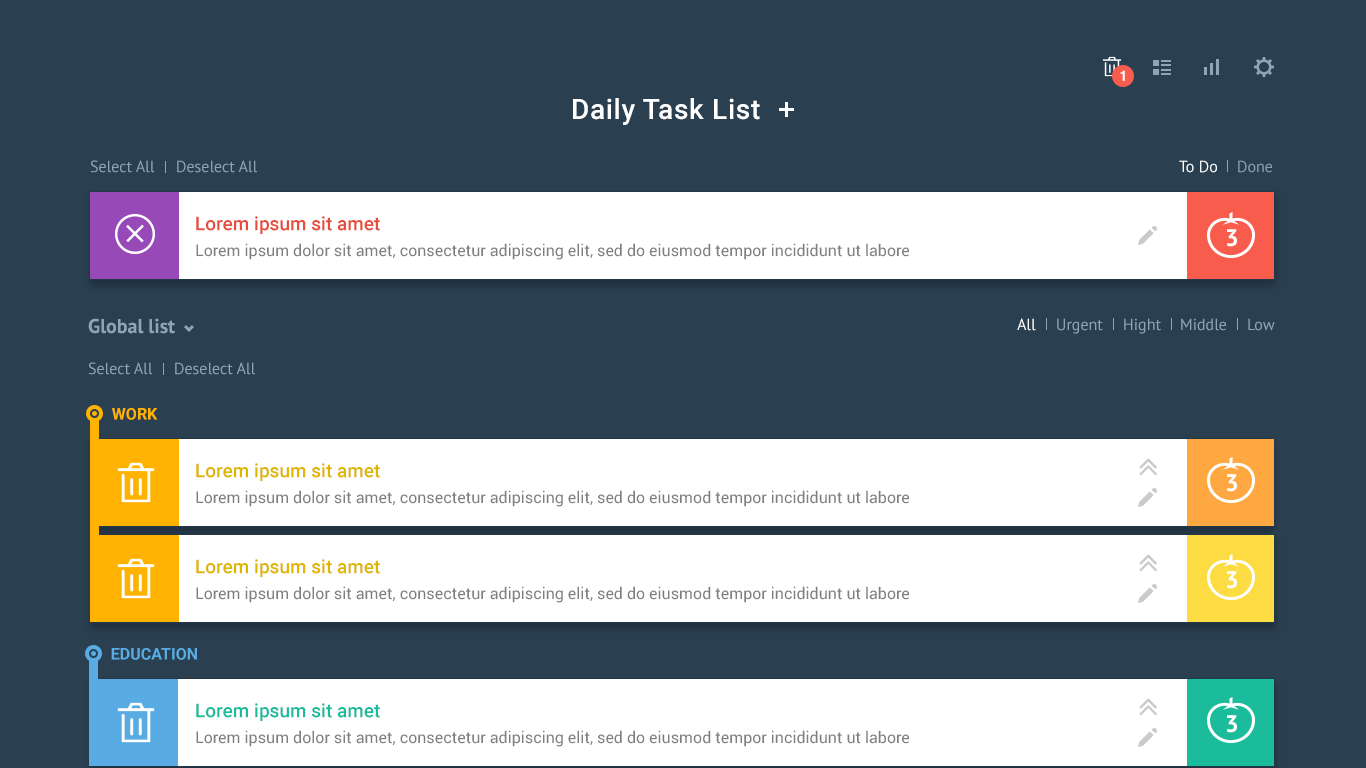
<style>
.page{position:relative;width:1366px;height:768px;background:#2a3f50}
.page>*{position:absolute;margin:0}
.t1{font:14px "Helvetica-Bold";color:#ffffff}
.t2{font:28px "Roboto-Medium";letter-spacing:0.025em;color:#ffffff}
.t3{font:16px "PTSans-Regular";color:#8da5b8}
.t4{font:16px "PTSans-Regular";color:#8ea5b8}
.t5{font:16px "PTSans-Regular";color:#ffffff}
.t6{font:16px "PTSans-Regular";color:#8aa2b5}
.t7{font:19px "Roboto-Medium";color:#e74c3c}
.t8{font:24px "PTSans-Bold";color:#ffffff}
.t9{font:16px "Roboto-Regular";color:#7f7f7f}
.t10{font:20px "PTSans-Bold";color:#8da5b8}
.t11{font:16px "Roboto-Bold";color:#ffb200;text-transform:uppercase}
.t12{font:19px "Roboto-Medium";color:#dfb500}
.t13{font:16px "Roboto-Bold";color:#59abe3;text-transform:uppercase}
.t14{font:19px "Roboto-Medium";color:#1abc9c}
</style>
<div class="page">
<p class="t1" style="left:1120px;top:70px;width:5px;height:11px">1</p>
<p class="t2" style="left:573px;top:98px;width:187px;height:27px">Daily Task List</p>
<p class="t3" style="left:90px;top:160px;width:65px;height:13px">Select All</p>
<p class="t4" style="left:177px;top:160px;width:80px;height:13px">Deselect All</p>
<p class="t5" style="left:1179px;top:160px;width:38px;height:13px">To Do</p>
<p class="t6" style="left:1238px;top:160px;width:34px;height:13px">Done</p>
<p class="t7" style="left:196px;top:216px;width:184px;height:18px">Lorem ipsum sit amet</p>
<p class="t8" style="left:1226px;top:229px;width:11px;height:18px">3</p>
<p class="t9" style="left:196px;top:243px;width:713px;height:17px">Lorem ipsum dolor sit amet, consectetur adipiscing elit, sed do eiusmod tempor incididunt ut labore</p>
<p class="t10" style="left:88px;top:318px;width:87px;height:16px">Global list</p>
<p class="t5" style="left:1017px;top:318px;width:19px;height:13px">All</p>
<p class="t4" style="left:1057px;top:318px;width:46px;height:16px">Urgent</p>
<p class="t4" style="left:1124px;top:318px;width:37px;height:16px">Hight</p>
<p class="t4" style="left:1181px;top:318px;width:45px;height:13px">Middle</p>
<p class="t4" style="left:1248px;top:318px;width:27px;height:13px">Low</p>
<p class="t3" style="left:88px;top:362px;width:65px;height:13px">Select All</p>
<p class="t4" style="left:175px;top:362px;width:80px;height:13px">Deselect All</p>
<p class="t11" style="left:112px;top:408px;width:46px;height:12px">Work</p>
<p class="t12" style="left:196px;top:463px;width:184px;height:18px">Lorem ipsum sit amet</p>
<p class="t8" style="left:1226px;top:474px;width:11px;height:18px">3</p>
<p class="t9" style="left:196px;top:490px;width:713px;height:17px">Lorem ipsum dolor sit amet, consectetur adipiscing elit, sed do eiusmod tempor incididunt ut labore</p>
<p class="t12" style="left:196px;top:559px;width:184px;height:18px">Lorem ipsum sit amet</p>
<p class="t8" style="left:1226px;top:571px;width:11px;height:18px">3</p>
<p class="t9" style="left:196px;top:586px;width:713px;height:17px">Lorem ipsum dolor sit amet, consectetur adipiscing elit, sed do eiusmod tempor incididunt ut labore</p>
<p class="t13" style="left:111px;top:648px;width:86px;height:12px">Education</p>
<p class="t14" style="left:196px;top:703px;width:184px;height:18px">Lorem ipsum sit amet</p>
<p class="t8" style="left:1226px;top:715px;width:11px;height:18px">3</p>
<p class="t9" style="left:196px;top:730px;width:713px;height:17px">Lorem ipsum dolor sit amet, consectetur adipiscing elit, sed do eiusmod tempor incididunt ut labore</p>
</div>
